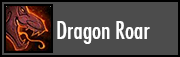
<style>
.page{position:relative;width:180px;height:57px;background:#4c4c4c}
.page>*{position:absolute;margin:0}
.t1{font:24px "FuturaCondensed";color:#ffffff}
</style>
<div class="page">
<p class="t1" style="left:57px;top:21px;width:93px;height:23px">Dragon Roar</p>
</div>
